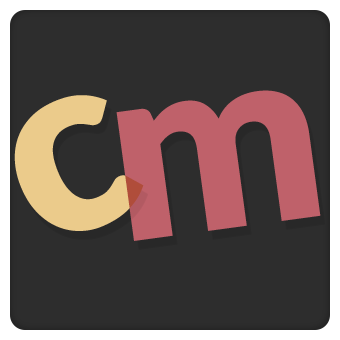
<style>
.page{position:relative;width:340px;height:340px;background:#2d2d2d}
.page>*{position:absolute;margin:0}
.t1{font:250px "Lato-Black";color:#ebcb8b}
.t2{font:250px "Lato-Black";color:#bf616a}
</style>
<div class="page">
<p class="t1" style="left:14px;top:95px;width:130px;height:136px;rotate:-23deg">c</p>
<p class="t2" style="left:116px;top:90px;width:205px;height:151px;rotate:-8deg">m</p>
</div>
